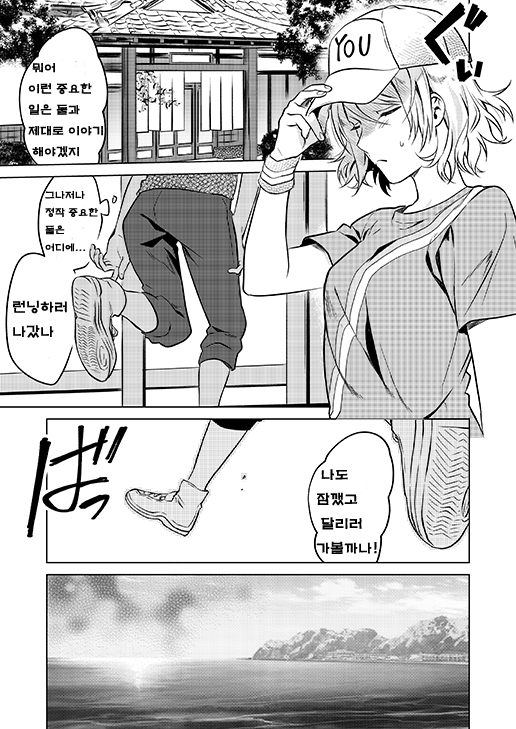
<style>
.page{position:relative;width:516px;height:729px;background:#ffffff}
.page>*{position:absolute;margin:0}
.t1{font:12px "H2mkpB";color:#000000}
.t2{font:10px "H2mkpB";color:#000000}
.t3{font:14px "H2mkpB";color:#000000}
</style>
<div class="page">
<p class="t1" style="left:28px;top:63px;width:75px;height:95px">뭐어<br>이런 중요한<br>일은 둘과<br>제대로 이야기<br> 해야겠지</p>
<p class="t2" style="left:45px;top:191px;width:53px;height:61px">그나저나<br>정작 중요한<br>둘은 <br>어디에...</p>
<p class="t3" style="left:13px;top:300px;width:54px;height:38px">런닝하러 나갔나</p>
<p class="t3" style="left:316px;top:469px;width:61px;height:85px">나도 <br>잠깼고<br> 달리러<br>가볼까나!</p>
</div>
